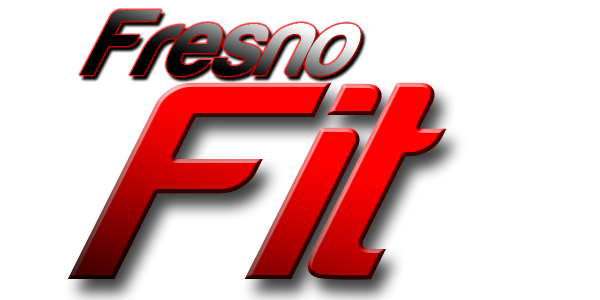
<style>
.page{position:relative;width:600px;height:300px;background:#ffffff}
.page>*{position:absolute;margin:0}
.t1{font:109px "Harabara";scale:0.89 1}
.t2{font:325.9px "Harabara";scale:1.04 1}
</style>
<div class="page">
<p class="t1" style="left:80px;top:10px;width:281px;height:66px">Fresno</p>
<p class="t2" style="left:68px;top:82px;width:379px;height:198px">Fit</p>
</div>
